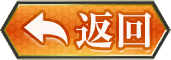
<style>
.page{position:relative;width:171px;height:60px}
.page>*{position:absolute;margin:0}
.t1{font:40px "RyuminPr6N-ExBold";color:#fef7f1}
</style>
<div class="page">
<p class="t1" style="left:76px;top:11px;width:75px;height:37px">返回</p>
</div>
